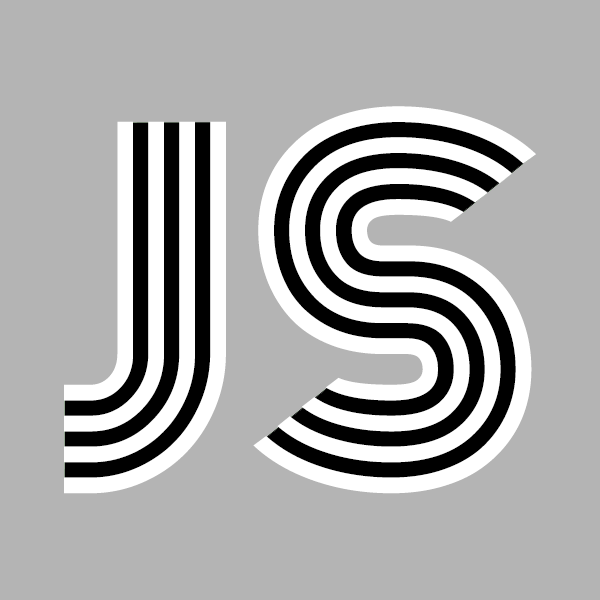
<style>
.page{position:relative;width:600px;height:600px;background:#b4b4b4}
.page>*{position:absolute;margin:0}
.t1{font:439.9px "Monoton-Regular";color:#ffffff}
</style>
<div class="page">
<p class="t1" style="left:64px;top:106px;width:472px;height:388px">JS</p>
</div>
